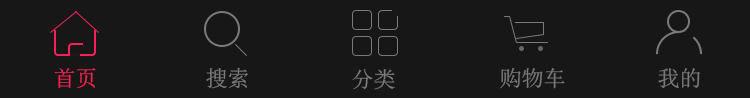
<style>
.page{position:relative;width:750px;height:98px;background:#171717}
.page>*{position:absolute;margin:0}
.t1{font:22px "SimSun";color:#f62154}
.t2{font:22px "SimSun";color:#7a7a7a}
</style>
<div class="page">
<p class="t1" style="left:54px;top:68px;width:42px;height:21px">首页</p>
<p class="t2" style="left:206px;top:67px;width:42px;height:22px">搜索</p>
<p class="t2" style="left:352px;top:69px;width:43px;height:21px">分类</p>
<p class="t2" style="left:500px;top:68px;width:65px;height:21px">购物车</p>
<p class="t2" style="left:658px;top:68px;width:42px;height:21px">我的</p>
</div>
